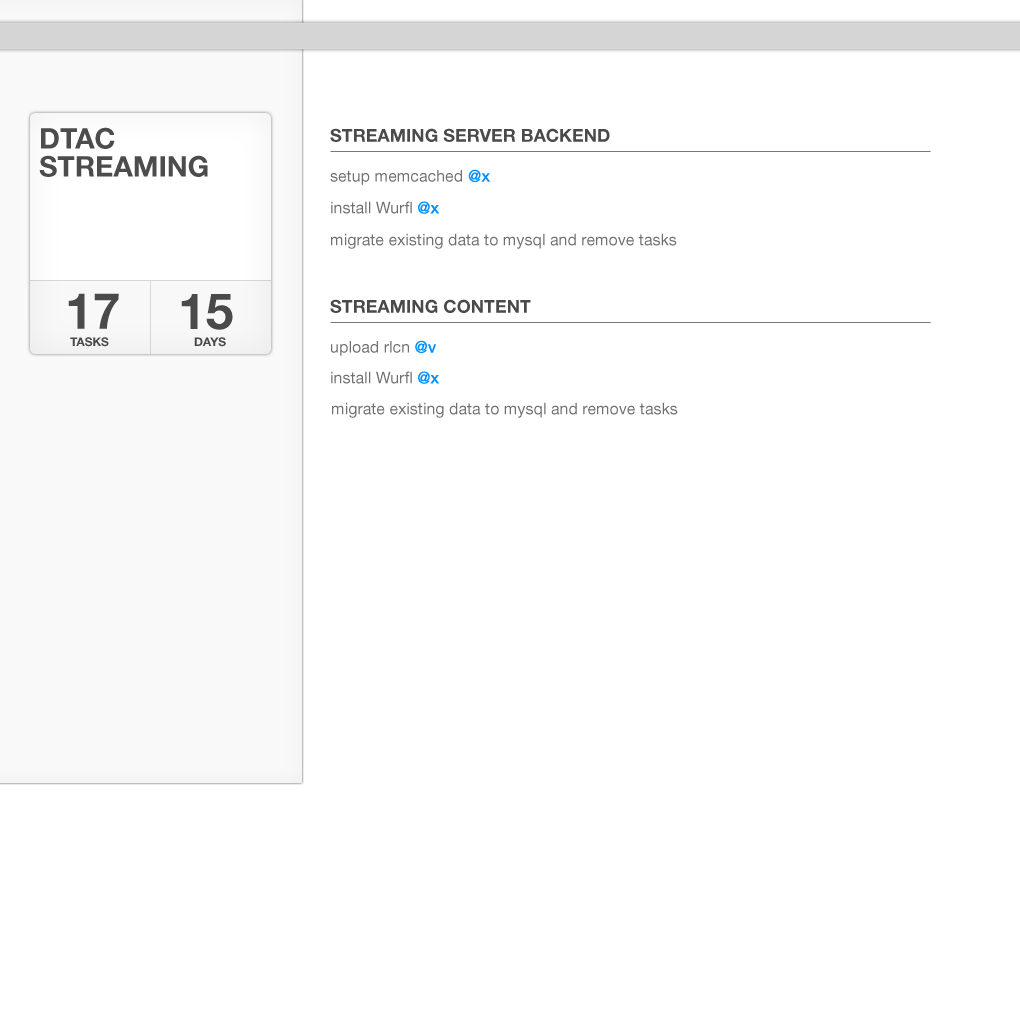
<style>
.page{position:relative;width:1020px;height:1020px;background:#ffffff}
.page>*{position:absolute;margin:0}
.t1{font:28.3px/28.1px "HelveticaNeueLTStd-Bd";color:#4c4c4c}
.t2{font:18px "HelveticaNeueLTStd-Bd";color:#4a4a4a;text-transform:uppercase}
.t3{font:16px "HelveticaNeueLTStd-Roman";color:#707070}
.t4{font:16px "HelveticaNeueLTStd-Roman";color:#0090ff;font-weight:bold}
.t5{font:50px "HelveticaNeueLTStd-Bd";color:#4a4a4a;text-transform:uppercase}
.t6{font:12px "HelveticaNeueLTStd-Bd";color:#4a4a4a;text-transform:uppercase}
</style>
<div class="page">
<p class="t1" style="left:39px;top:127px;width:169px;height:50px">DTAC <br>STREAMING</p>
<p class="t2" style="left:330px;top:128px;width:280px;height:14px">Streaming Server backend</p>
<p class="t3" style="left:330px;top:169px;width:160px;height:16px">setup memcached<span class="t4"> @x</span></p>
<p class="t3" style="left:331px;top:201px;width:108px;height:13px">install Wurfl <span class="t4">@x</span></p>
<p class="t3" style="left:331px;top:233px;width:346px;height:16px">migrate existing data to mysql and remove tasks</p>
<p class="t5" style="left:68px;top:293px;width:51px;height:36px">17</p>
<p class="t5" style="left:181px;top:294px;width:52px;height:36px">15</p>
<p class="t2" style="left:330px;top:299px;width:201px;height:14px">Streaming Content</p>
<p class="t6" style="left:70px;top:337px;width:39px;height:10px">tasks</p>
<p class="t6" style="left:194px;top:337px;width:32px;height:10px">days</p>
<p class="t3" style="left:331px;top:340px;width:105px;height:16px">upload rlcn <span class="t4">@v</span></p>
<p class="t3" style="left:331px;top:371px;width:108px;height:13px">install Wurfl <span class="t4">@x</span></p>
<p class="t3" style="left:332px;top:402px;width:346px;height:16px">migrate existing data to mysql and remove tasks</p>
</div>
